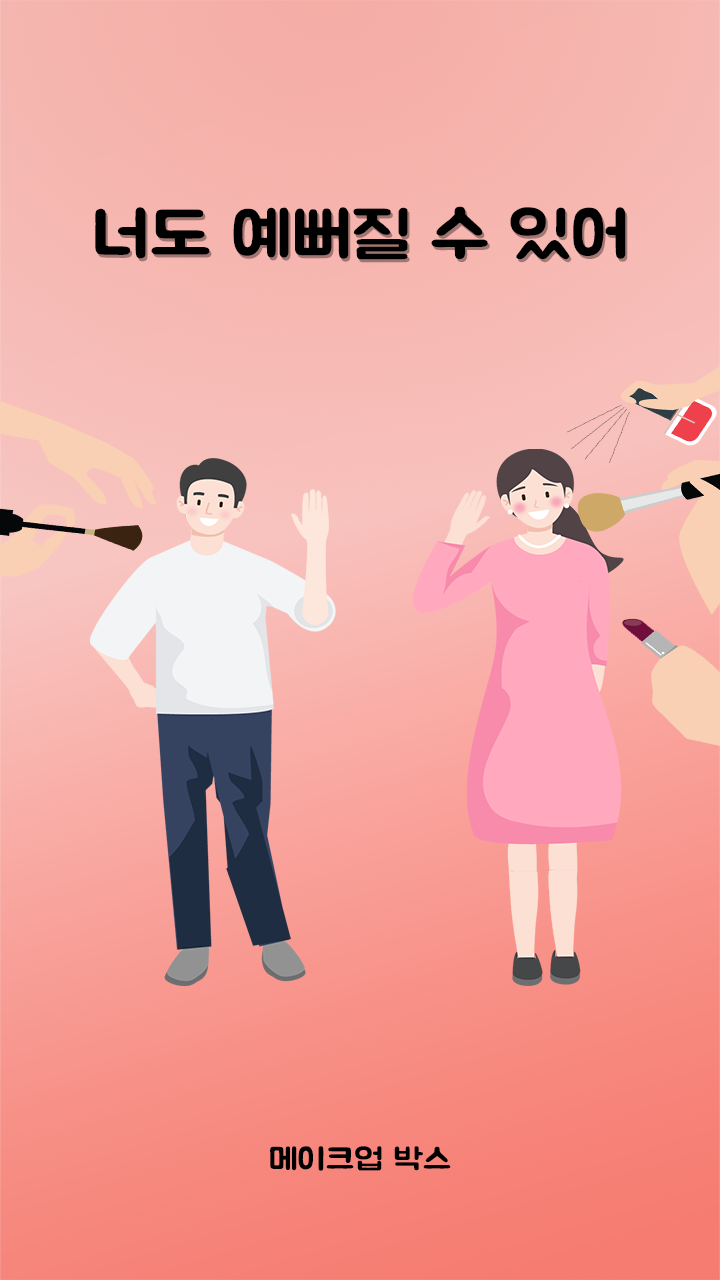
<style>
.page{position:relative;width:720px;height:1280px}
.page>*{position:absolute;margin:0}
.t1{font:63.2px "BMJUA";color:#000000;scale:1.19 1}
.t2{font:30.3px "BMJUA";color:#000000;scale:1.19 1}
</style>
<div class="page">
<p class="t1" style="left:95px;top:206px;width:531px;height:54px">너도 예뻐질 수 있어</p>
<p class="t2" style="left:270px;top:1146px;width:181px;height:25px">메이크업 박스</p>
</div>
